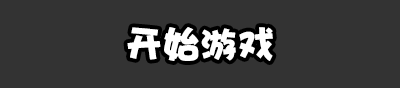
<style>
.page{position:relative;width:400px;height:88px;background:#333333}
.page>*{position:absolute;margin:0}
.t1{font:37.3px "DFPHaiBaoW12";color:#ffffff}
</style>
<div class="page">
<p class="t1" style="left:127px;top:27px;width:146px;height:34px">开始游戏</p>
</div>
